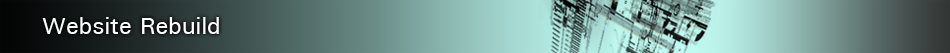
<style>
.page{position:relative;width:950px;height:53px}
.page>*{position:absolute;margin:0}
.t1{font:24px "UniversMedium";color:#ffffff}
</style>
<div class="page">
<p class="t1" style="left:42px;top:17px;width:177px;height:17px">Website Rebuild</p>
</div>
